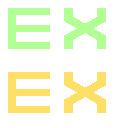
<style>
.page{position:relative;width:128px;height:128px;background:#ffffff}
.page>*{position:absolute;margin:0}
.t1{font:46px "7THDR2020Regular";letter-spacing:0.18em;color:#aaff88;text-transform:uppercase;font-weight:bold}
.t2{font:46px "7THDR2020Regular";letter-spacing:0.18em;color:#ffdd55;text-transform:uppercase;font-weight:bold}
</style>
<div class="page">
<p class="t1" style="left:8px;top:8px;width:98px;height:41px">EX</p>
<p class="t2" style="left:8px;top:72px;width:98px;height:41px">EX</p>
</div>
